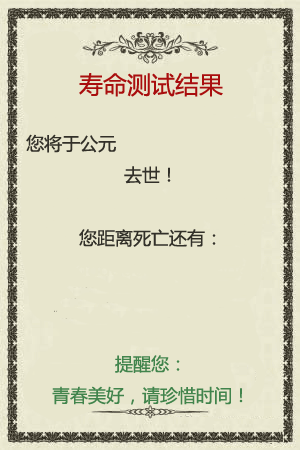
<style>
.page{position:relative;width:300px;height:450px;background:#e8e6cd}
.page>*{position:absolute;margin:0}
.t1{font:24px "MicrosoftYaHei";color:#a90e0e}
.t2{font:18px "MicrosoftYaHei";color:#e8e6cd}
.t3{font:18px "MicrosoftYaHei";color:#5c594c}
.t4{font:18px "MicrosoftYaHei";color:#323029}
.t5{font:18px "MicrosoftYaHei";color:#41844c}
</style>
<div class="page">
<p class="t1" style="left:79px;top:73px;width:144px;height:24px">寿命测试结果</p>
<p class="t2" style="left:26px;top:134px;width:248px;height:271px;text-align:center"><span class="t3">                 <br></span><span class="t4">您将于公元 </span>2043 年 10 月16日<br><span class="t4">去世！<br><br>您距离死亡还有：       </span>dddddddddddddddddddddd          <br><br><span class="t5">提醒您：<br>青春美好，请珍惜时间！</span></p>
</div>
